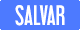
<style>
.page{position:relative;width:80px;height:30px;background:#4d7aff}
.page>*{position:absolute;margin:0}
.t1{font:25px "LibelSuit-Regular";letter-spacing:0.01em;color:#ffffff}
</style>
<div class="page">
<p class="t1" style="left:15px;top:5px;width:50px;height:21px">SALVAR</p>
</div>
